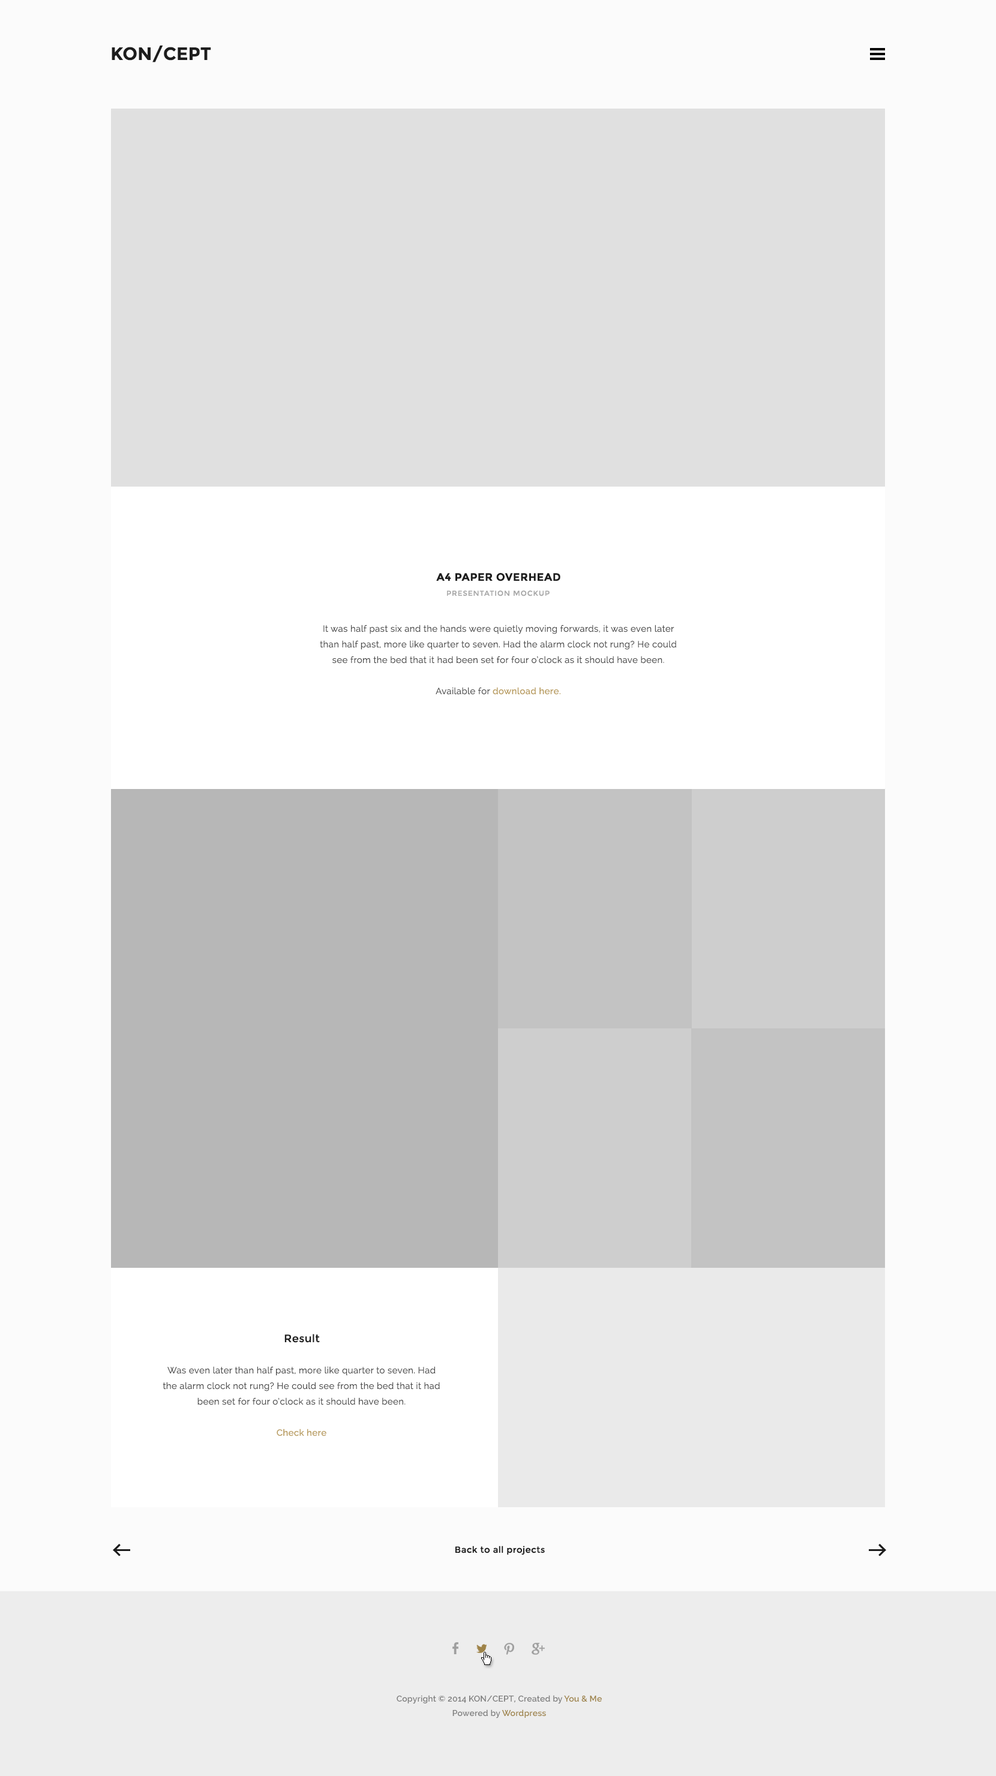
<style>
.page{position:relative;width:996px;height:1776px;background:#fbfbfb}
.page>*{position:absolute;margin:0}
.t1{font:18px "Montserrat-Bold";color:#1d1d1d;text-transform:uppercase}
.t2{font:10.8px "Montserrat-Bold";letter-spacing:0.025em;color:#1d1d1d;text-transform:uppercase}
.t3{font:7.2px "Montserrat-Regular";letter-spacing:0.075em;color:#a8a8a8;text-transform:uppercase}
.t4{font:9px/15.6px "Raleway";letter-spacing:0.025em;color:#4d4d4d}
.t5{font:9px/15.6px "Raleway-Medium";letter-spacing:0.025em;color:#ba9e62}
.t6{font:10.8px "Montserrat-Regular";letter-spacing:0.025em;color:#1d1d1d}
.t7{font:9px "Montserrat-Regular";letter-spacing:0.025em;color:#1d1d1d}
.t8{font:8.4px/14.4px "Raleway-SemiBold";letter-spacing:0.01em;color:#7d7d7d}
.t9{font:8.4px/14.4px "Raleway-SemiBold";letter-spacing:0.01em;color:#9e8348}
</style>
<div class="page">
<p class="t1" style="left:112px;top:45px;width:99px;height:17px">kON/CEPT</p>
<p class="t2" style="left:436px;top:573px;width:124px;height:8px">A4 Paper overhead</p>
<p class="t3" style="left:447px;top:590px;width:103px;height:6px">presentation mockup</p>
<p class="t4" style="left:320px;top:625px;width:356px;height:70px;text-align:center">It was half past six and the hands were quietly moving forwards, it was even later than half past, more like quarter to seven. Had the alarm clock not rung? He could see from the bed that it had been set for four o’clock as it should have been.<br><br>Available for <span class="t5">download here.</span></p>
<p class="t6" style="left:284px;top:1334px;width:36px;height:9px">Result</p>
<p class="t4" style="left:163px;top:1366px;width:277px;height:70px;text-align:center">Was even later than half past, more like quarter to seven. Had the alarm clock not rung? He could see from the bed that it had been set for four o’clock as it should have been.<br><br><span class="t5">Check here</span></p>
<p class="t7" style="left:455px;top:1546px;width:90px;height:9px">Back to all projects</p>
<p class="t8" style="left:397px;top:1695px;width:205px;height:23px;text-align:center">Copyright © 2014 KON/CEPT, Created by <span class="t9">You &amp; Me<br></span>Powered by <span class="t9">Wordpress</span></p>
</div>
